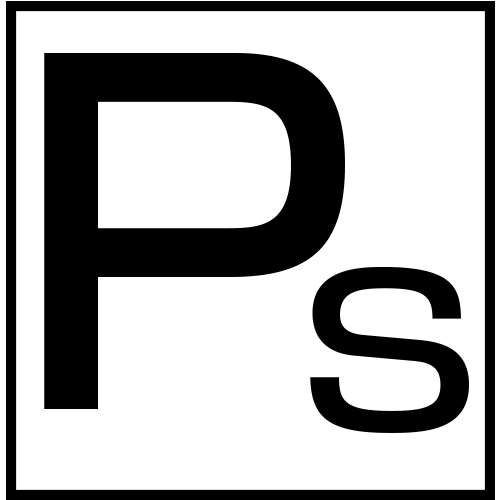
<style>
.page{position:relative;width:500px;height:500px;background:#ffffff}
.page>*{position:absolute;margin:0}
.t1{font:451.8px "ShinGoPro-Medium";color:#000000}
.t2{font:206.2px "ShinGoPro-Medium";color:#000000;scale:1.17 1}
</style>
<div class="page">
<p class="t1" style="left:44px;top:53px;width:301px;height:356px">P</p>
<p class="t2" style="left:310px;top:267px;width:159px;height:166px">S</p>
</div>
